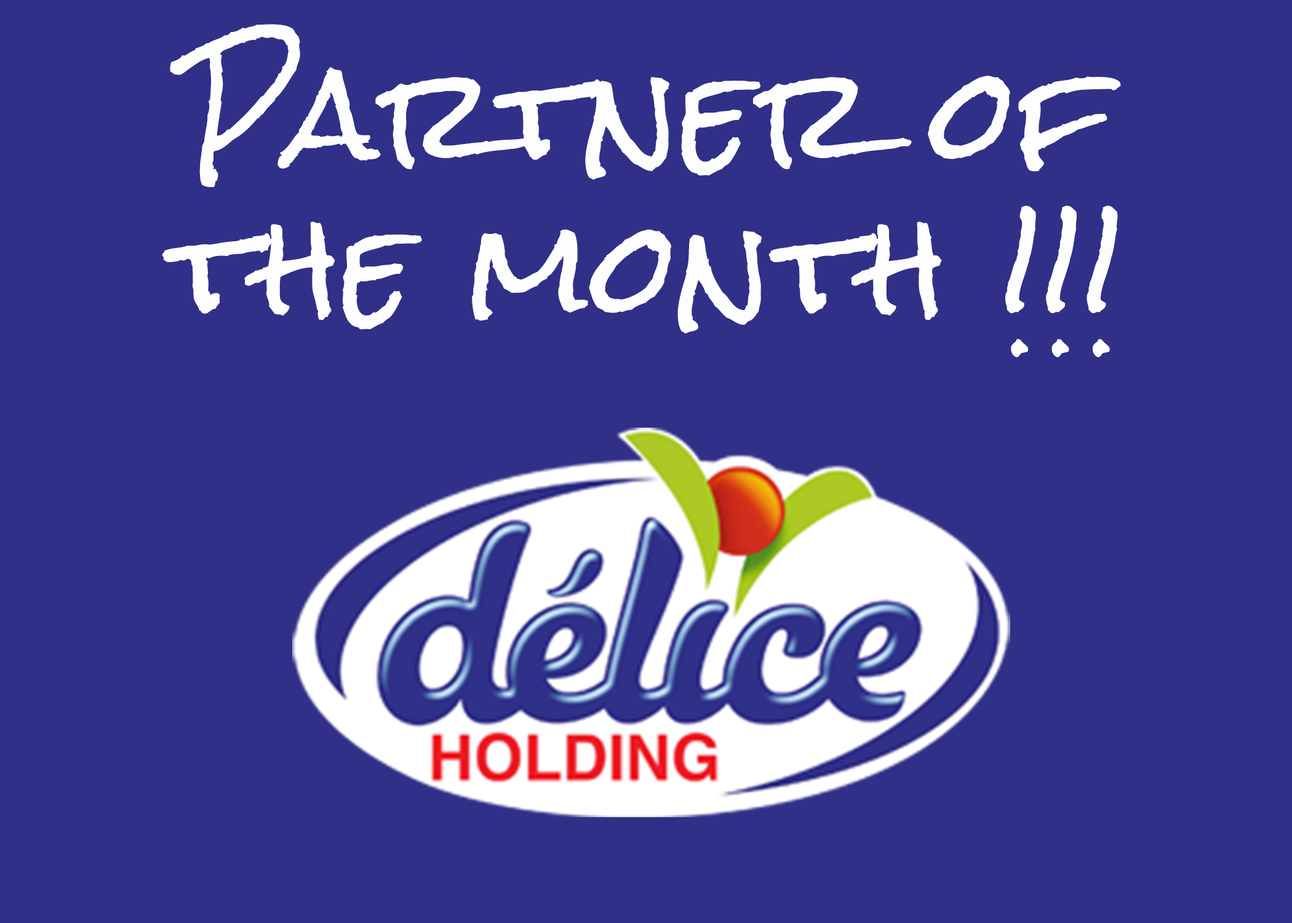
<style>
.page{position:relative;width:1292px;height:923px;background:#303088}
.page>*{position:absolute;margin:0}
.t1{font:123.1px/153.8px "RockSalt";letter-spacing:0.025em;color:#fdfdfd}
</style>
<div class="page">
<p class="t1" style="left:162px;top:24px;width:959px;height:333px;text-align:center">Partner of the month !!!</p>
</div>
